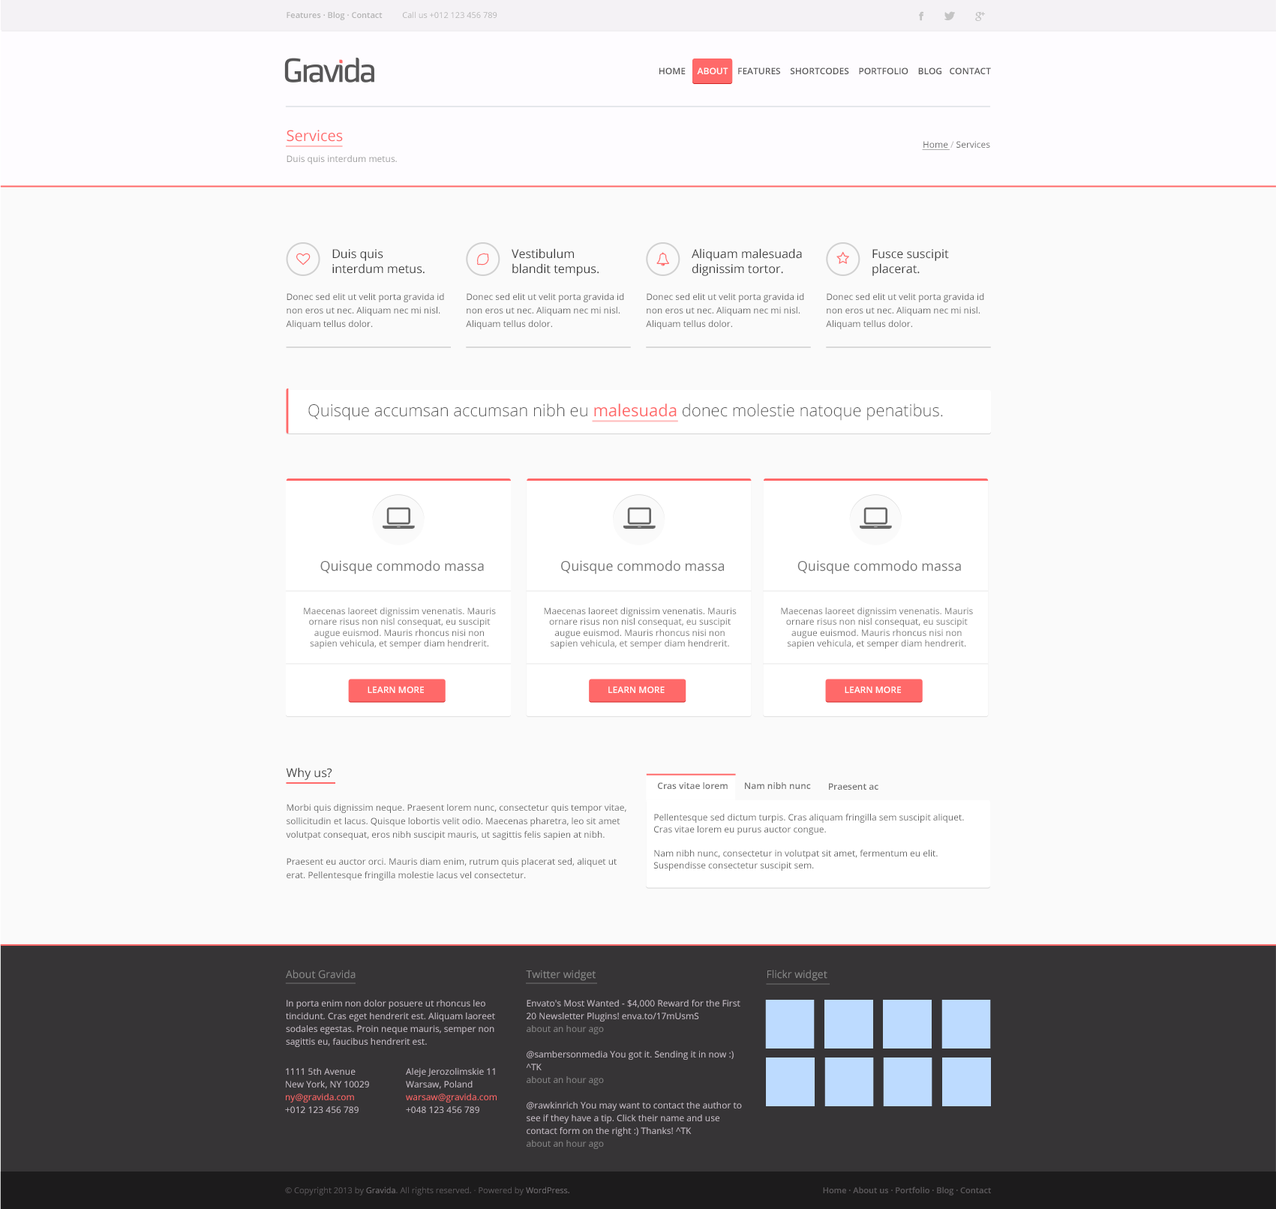
<style>
.page{position:relative;width:1276px;height:1209px;background:#fafafa}
.page>*{position:absolute;margin:0}
.t1{font:8.2px "OpenSans-Semibold";color:#b3b3b3}
.t2{font:8.2px "OpenSans";color:#b3b3b3}
.t3{font:9px "OpenSans-Semibold";color:#575657;text-transform:uppercase}
.t4{font:9px "OpenSans-Semibold";color:#ffffff;text-transform:uppercase}
.t5{font:9px/11.2px "OpenSans";color:#999999}
.t6{font:15px/20.2px "OpenSans";color:#ff6969}
.t7{font:9px "OpenSans";color:#666666}
.t8{font:9px "OpenSans";color:#b3b3b3}
.t9{font:12px/15px "OpenSans";color:#3d3d3d}
.t10{font:9px/13.5px "OpenSans";color:#666666}
.t11{font:16.5px "OpenSans-Light";color:#595959}
.t12{font:16.5px "OpenSans";color:#ff6969}
.t13{font:13.5px "OpenSans";color:#737373}
.t14{font:9px "OpenSans";color:#737373}
.t15{font:12px "OpenSans";color:#3d3d3d}
.t16{font:9px "OpenSans-Semibold";color:#737373}
.t17{font:9px/12px "OpenSans";color:#666666}
.t18{font:10.5px "OpenSans";color:#8a8a8a}
.t19{font:9px/12.8px "OpenSans";color:#c7bec7}
.t20{font:9px/12.8px "OpenSans";color:#878787}
.t21{font:9px/12.8px "OpenSans";color:#ff6969}
.t22{font:8.2px "OpenSans";color:#5c595c}
.t23{font:8.2px "OpenSans";color:#757175}
.t24{font:8.2px "ArialMT";color:#5c595c}
.t25{font:8.2px "OpenSans-Semibold";color:#5c595c}
</style>
<div class="page">
<p class="t1" style="left:286px;top:11px;width:96px;height:9px">Features · Blog · Contact</p>
<p class="t2" style="left:403px;top:11px;width:94px;height:7px">Call us +012 123 456 789</p>
<p class="t3" style="left:659px;top:68px;width:332px;height:6px">Home     <span class="t4">About</span>    Features    Shortcodes    Portfolio    Blog   Contact</p>
<p class="t5" style="left:286px;top:130px;width:111px;height:34px"><span class="t6">Services<br><br></span>Duis quis interdum metus.</p>
<p class="t7" style="left:923px;top:141px;width:67px;height:7px">Home <span class="t8">/ </span>Services</p>
<p class="t9" style="left:332px;top:249px;width:92px;height:25px">Duis quis <br>interdum metus.</p>
<p class="t9" style="left:512px;top:248px;width:86px;height:28px">Vestibulum <br>blandit tempus.</p>
<p class="t9" style="left:692px;top:248px;width:110px;height:28px">Aliquam malesuada dignissim tortor.</p>
<p class="t9" style="left:872px;top:249px;width:77px;height:27px">Fusce suscipit <br>placerat.</p>
<p class="t10" style="left:286px;top:293px;width:158px;height:36px">Donec sed elit ut velit porta gravida id non eros ut nec. Aliquam nec mi nisl. Aliquam tellus dolor.</p>
<p class="t10" style="left:466px;top:293px;width:158px;height:36px">Donec sed elit ut velit porta gravida id non eros ut nec. Aliquam nec mi nisl. Aliquam tellus dolor.</p>
<p class="t10" style="left:646px;top:293px;width:158px;height:36px">Donec sed elit ut velit porta gravida id non eros ut nec. Aliquam nec mi nisl. Aliquam tellus dolor.</p>
<p class="t10" style="left:826px;top:293px;width:158px;height:36px">Donec sed elit ut velit porta gravida id non eros ut nec. Aliquam nec mi nisl. Aliquam tellus dolor.</p>
<p class="t11" style="left:308px;top:404px;width:635px;height:17px">Quisque accumsan accumsan nibh eu <span class="t12">malesuada </span>donec molestie natoque penatibus.</p>
<p class="t13" style="left:320px;top:560px;width:164px;height:14px">Quisque commodo massa</p>
<p class="t13" style="left:561px;top:560px;width:163px;height:14px">Quisque commodo massa</p>
<p class="t13" style="left:797px;top:560px;width:164px;height:14px">Quisque commodo massa</p>
<p class="t14" style="left:304px;top:608px;width:192px;height:41px;text-align:center">Maecenas laoreet dignissim venenatis. Mauris ornare risus non nisl consequat, eu suscipit augue euismod. Mauris rhoncus nisi non sapien vehicula, et semper diam hendrerit.</p>
<p class="t14" style="left:544px;top:608px;width:192px;height:41px;text-align:center">Maecenas laoreet dignissim venenatis. Mauris ornare risus non nisl consequat, eu suscipit augue euismod. Mauris rhoncus nisi non sapien vehicula, et semper diam hendrerit.</p>
<p class="t14" style="left:781px;top:608px;width:192px;height:41px;text-align:center">Maecenas laoreet dignissim venenatis. Mauris ornare risus non nisl consequat, eu suscipit augue euismod. Mauris rhoncus nisi non sapien vehicula, et semper diam hendrerit.</p>
<p class="t4" style="left:368px;top:686px;width:56px;height:7px">learn more</p>
<p class="t4" style="left:608px;top:686px;width:56px;height:7px">learn more</p>
<p class="t4" style="left:844px;top:686px;width:57px;height:7px">learn more</p>
<p class="t15" style="left:286px;top:767px;width:46px;height:13px">Why us?</p>
<p class="t16" style="left:658px;top:782px;width:70px;height:7px">Cras vitae lorem</p>
<p class="t16" style="left:745px;top:782px;width:66px;height:7px">Nam nibh nunc</p>
<p class="t16" style="left:829px;top:783px;width:49px;height:7px">Praesent ac</p>
<p class="t10" style="left:286px;top:804px;width:340px;height:76px">Morbi quis dignissim neque. Praesent lorem nunc, consectetur quis tempor vitae, sollicitudin et lacus. Quisque lobortis velit odio. Maecenas pharetra, leo sit amet volutpat consequat, eros nibh suscipit mauris, ut sagittis felis sapien at nibh. <br><br>Praesent eu auctor orci. Mauris diam enim, rutrum quis placerat sed, aliquet ut erat. Pellentesque fringilla molestie lacus vel consectetur.</p>
<p class="t17" style="left:653px;top:814px;width:311px;height:57px">Pellentesque sed dictum turpis. Cras aliquam fringilla sem suscipit aliquet. Cras vitae lorem eu purus auctor congue.<br><br>Nam nibh nunc, consectetur in volutpat sit amet, fermentum eu elit. Suspendisse consectetur suscipit sem.</p>
<p class="t18" style="left:286px;top:970px;width:70px;height:9px">About Gravida</p>
<p class="t18" style="left:526px;top:970px;width:70px;height:11px">Twitter widget</p>
<p class="t18" style="left:767px;top:970px;width:60px;height:11px">Flickr widget</p>
<p class="t19" style="left:286px;top:1000px;width:209px;height:47px">In porta enim non dolor posuere ut rhoncus leo tincidunt. Cras eget hendrerit est. Aliquam laoreet sodales egestas. Proin neque mauris, semper non sagittis eu, faucibus hendrerit est.</p>
<p class="t19" style="left:526px;top:1000px;width:216px;height:149px">Envato's Most Wanted - $4,000 Reward for the First 20 Newsletter Plugins! enva.to/17mUsmS<br><span class="t20">about an hour ago<br><br></span>@sambersonmedia You got it. Sending it in now :) ^TK<br><span class="t20">about an hour ago<br><br></span>@rawkinrich You may want to contact the author to see if they have a tip. Click their name and use contact form on the right :) Thanks! ^TK<br><span class="t20">about an hour ago</span></p>
<p class="t19" style="left:285px;top:1068px;width:84px;height:45px">1111 5th Avenue<br>New York, NY 10029<br><span class="t21">ny@gravida.com<br></span>+012 123 456 789</p>
<p class="t19" style="left:406px;top:1068px;width:90px;height:45px">Aleje Jerozolimskie 11<br>Warsaw, Poland<br><span class="t21">warsaw@gravida.com<br></span>+048 123 456 789</p>
<p class="t22" style="left:285px;top:1186px;width:284px;height:10px">© Copyright 2013 by <span class="t23">Gravida</span>. All rights reserved. <span class="t24">∙</span> Powered by <span class="t23">WordPress.</span></p>
<p class="t25" style="left:823px;top:1186px;width:168px;height:10px">Home · About us · Portfolio · Blog · Contact</p>
</div>
